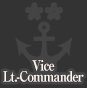
<style>
.page{position:relative;width:87px;height:88px;background:#333333}
.page>*{position:absolute;margin:0}
.t1{font:14px/11px "RyuminPro-ExBold";letter-spacing:-0.08em;color:#fff6f2;scale:0.9 1}
</style>
<div class="page">
<p class="t1" style="left:3px;top:60px;width:81px;height:22px;text-align:center">Vice<br>Lt.-Commander</p>
</div>
